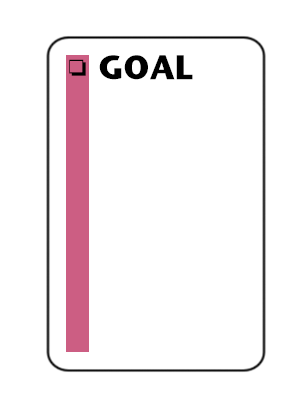
<style>
.page{position:relative;width:307px;height:409px;background:#ffffff}
.page>*{position:absolute;margin:0}
.t1{font:23.1px "MS-Gothic";color:#000000;scale:1.04 1}
.t2{font:33.7px "StoneSansITC-Bold";color:#000000}
</style>
<div class="page">
<p class="t1" style="left:69px;top:59px;width:17px;height:17px">❏</p>
<p class="t2" style="left:99px;top:55px;width:94px;height:25px">GOAL</p>
</div>
